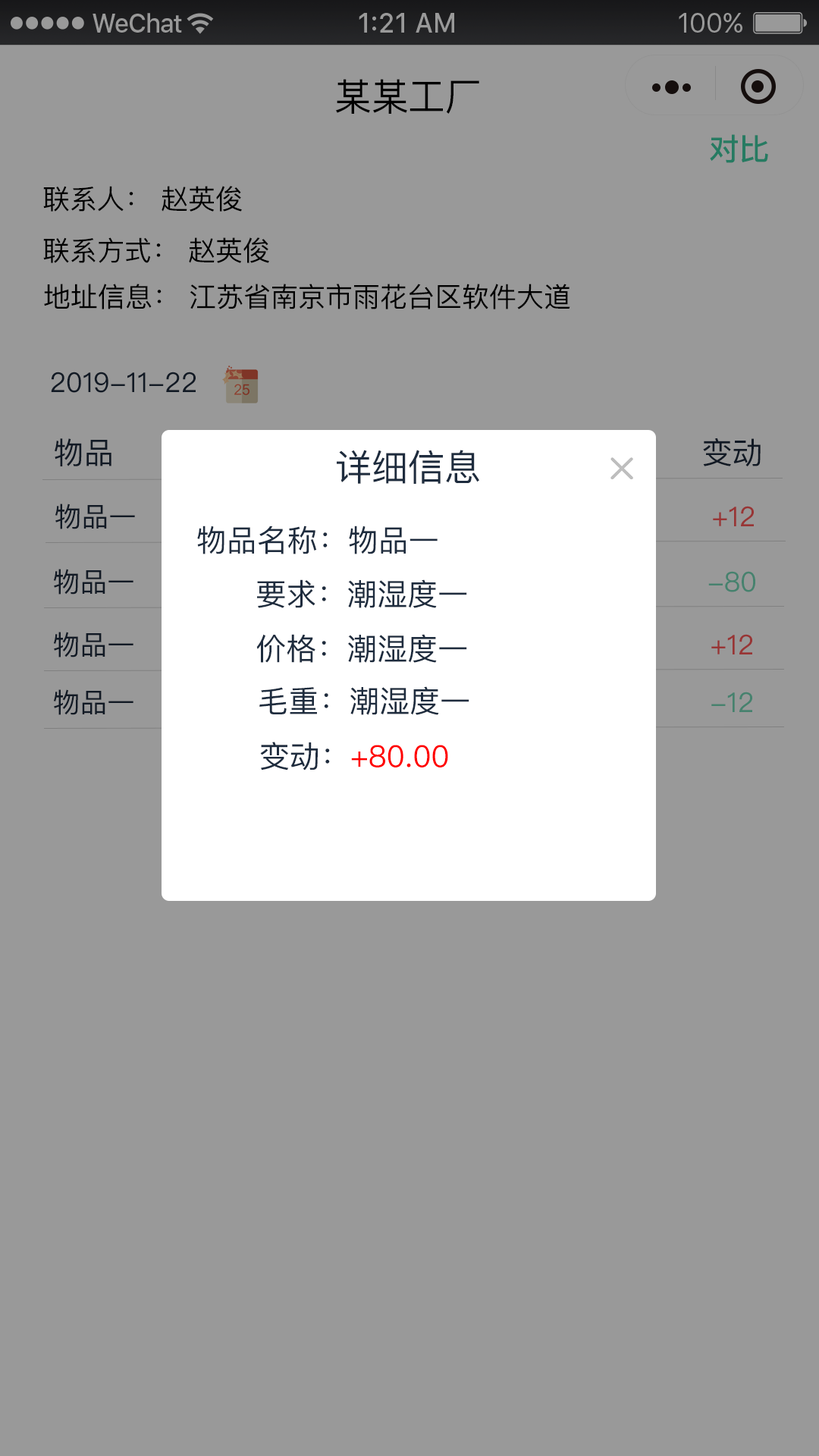
<style>
.page{position:relative;width:819px;height:1456px;background:#999999}
.page>*{position:absolute;margin:0}
.t1{font:37.9px "PingFangSC-Regular";color:#000000}
.t2{font:30.3px "PingFangSC-Medium";color:#267b62}
.t3{font:27.3px "PingFangSC-Regular";color:#000000}
.t4{font:27.3px "PingFangSC-Regular";color:#121a25}
.t5{font:30.3px "PingFangSC-Regular";color:#121a25}
.t6{font:36.4px "PingFangSC-Regular";color:#1e2c3e}
.t7{font:27.3px "PingFangSC-Regular";color:#983535}
.t8{font:30.3px "PingFangSC-Regular";color:#1e2c3e}
.t9{font:27.3px "PingFangSC-Regular";color:#46826e}
.t10{font:30.3px "PingFangSC-Regular";color:#ff0000}
</style>
<div class="page">
<p class="t1" style="left:335px;top:79px;width:144px;height:35px">某某工厂</p>
<p class="t2" style="left:710px;top:134px;width:58px;height:29px">对比</p>
<p class="t3" style="left:43px;top:186px;width:199px;height:26px">联系人： 赵英俊</p>
<p class="t3" style="left:43px;top:237px;width:226px;height:26px">联系方式： 赵英俊</p>
<p class="t3" style="left:44px;top:284px;width:526px;height:25px">地址信息： 江苏省南京市雨花台区软件大道</p>
<p class="t4" style="left:51px;top:372px;width:145px;height:21px">2019-11-22</p>
<p class="t5" style="left:703px;top:438px;width:58px;height:28px">变动</p>
<p class="t5" style="left:55px;top:438px;width:56px;height:28px">物品</p>
<p class="t6" style="left:337px;top:450px;width:142px;height:34px">详细信息</p>
<p class="t4" style="left:55px;top:504px;width:80px;height:25px">物品一</p>
<p class="t7" style="left:713px;top:506px;width:41px;height:20px">+12</p>
<p class="t8" style="left:197px;top:526px;width:241px;height:28px">物品名称：物品一</p>
<p class="t4" style="left:53px;top:569px;width:80px;height:26px">物品一</p>
<p class="t8" style="left:257px;top:579px;width:210px;height:29px">要求：潮湿度一</p>
<p class="t9" style="left:708px;top:571px;width:47px;height:21px">-80</p>
<p class="t4" style="left:53px;top:632px;width:80px;height:25px">物品一</p>
<p class="t8" style="left:256px;top:634px;width:211px;height:29px">价格：潮湿度一</p>
<p class="t7" style="left:711px;top:634px;width:41px;height:20px">+12</p>
<p class="t4" style="left:53px;top:689px;width:80px;height:26px">物品一</p>
<p class="t8" style="left:259px;top:686px;width:210px;height:29px">毛重：潮湿度一</p>
<p class="t9" style="left:711px;top:692px;width:41px;height:20px">-12</p>
<p class="t10" style="left:260px;top:742px;width:188px;height:28px"><span class="t8"><br>    变动：</span>+80.00</p>
</div>
